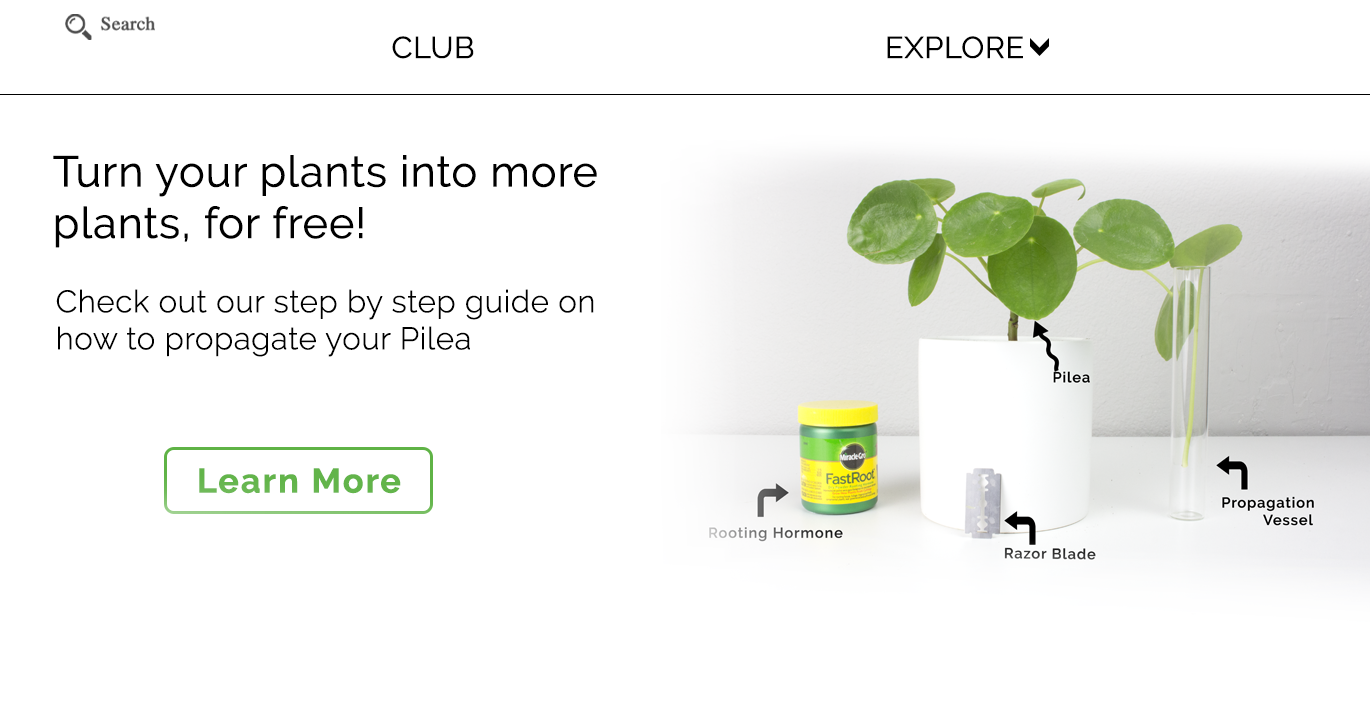
<style>
.page{position:relative;width:1370px;height:712px;background:#ffffff}
.page>*{position:absolute;margin:0}
.t1{font:30px "Raleway-Regular";color:#000000;font-weight:bold}
.t2{font:42.9px "Raleway-Regular";color:#000000;font-weight:bold}
.t3{font:30.9px "Raleway-Light";color:#000000;font-weight:bold}
.t4{font:34px "Raleway-Bold";letter-spacing:0.04em;color:#62b44a;font-weight:bold}
</style>
<div class="page">
<p class="t1" style="left:392px;top:36px;width:82px;height:23px">CLUB</p>
<p class="t1" style="left:887px;top:36px;width:136px;height:23px">EXPLORE</p>
<p class="t2" style="left:53px;top:155px;width:544px;height:93px">Turn your plants into more<br>plants, for free!</p>
<p class="t3" style="left:56px;top:289px;width:538px;height:68px">Check out our step by step guide on <br>how to propagate your Pilea</p>
<p class="t4" style="left:199px;top:468px;width:202px;height:26px">Learn More</p>
</div>
